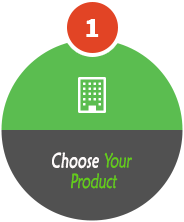
<style>
.page{position:relative;width:184px;height:222px;background:#ffffff}
.page>*{position:absolute;margin:0}
.t1{font:20.6px/6.9px "MaiandraGD-Regular";color:#64cc18;font-style:italic;scale:0.68 1}
.t2{font:20.6px/6.9px "MaiandraGD-Regular";color:#fefbfb;font-weight:bold;font-style:italic;scale:0.68 1}
</style>
<div class="page">
<p class="t1" style="left:52px;top:152px;width:80px;height:37px;text-align:center"><span class="t2">Choose </span>Your <br><br><br>Product</p>
</div>
